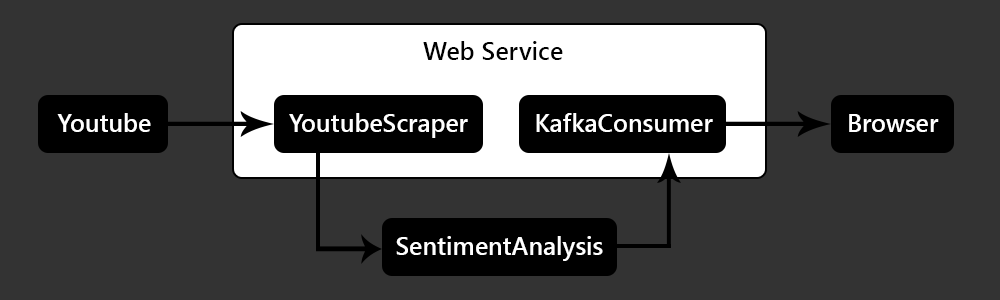
<style>
.page{position:relative;width:1000px;height:300px;background:#333333}
.page>*{position:absolute;margin:0}
.t1{font:25px "SegoeUI-Semibold";color:#000000}
.t2{font:25px "SegoeUI-Semibold";color:#ffffff}
</style>
<div class="page">
<p class="t1" style="left:423px;top:41px;width:140px;height:19px">Web Service</p>
<p class="t2" style="left:57px;top:113px;width:94px;height:19px">Youtube</p>
<p class="t2" style="left:289px;top:113px;width:179px;height:25px">YoutubeScraper</p>
<p class="t2" style="left:536px;top:113px;width:177px;height:19px">KafkaConsumer</p>
<p class="t2" style="left:849px;top:114px;width:90px;height:18px">Browser</p>
<p class="t2" style="left:396px;top:236px;width:207px;height:25px">SentimentAnalysis</p>
</div>
